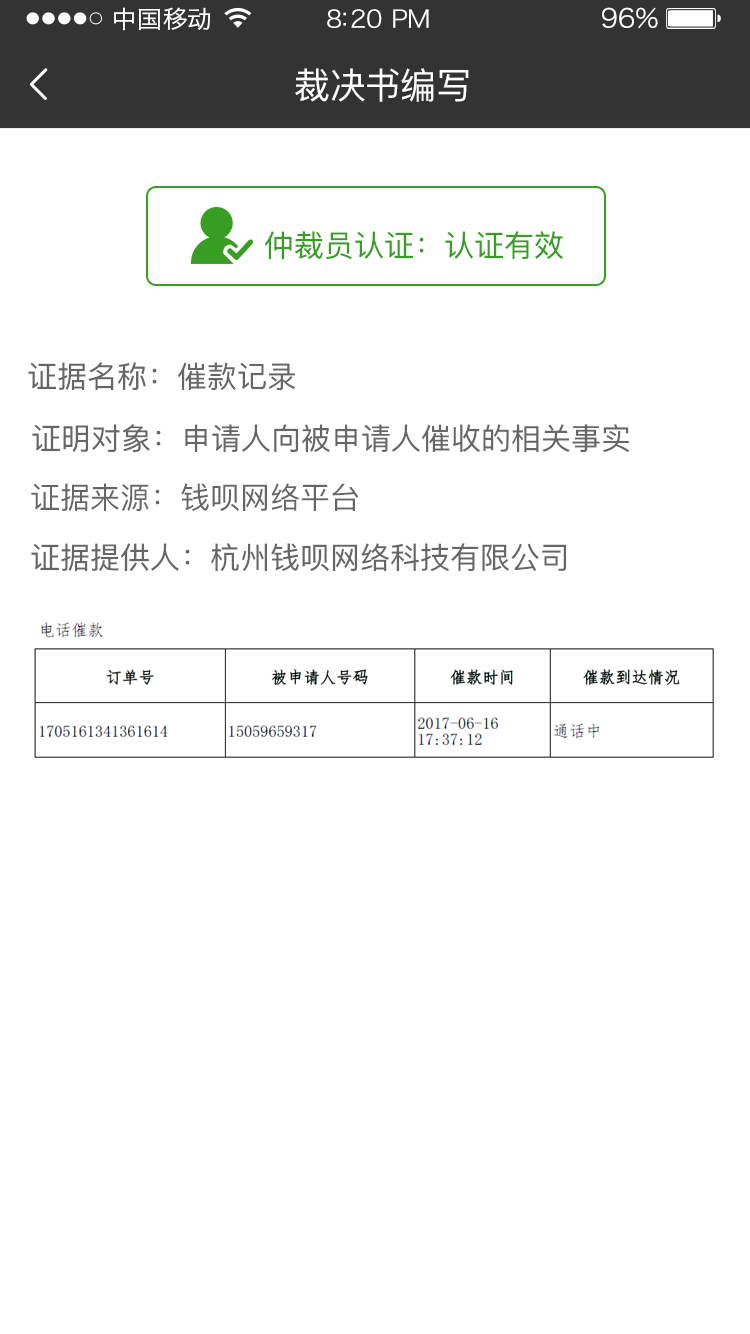
<style>
.page{position:relative;width:750px;height:1334px;background:#ffffff}
.page>*{position:absolute;margin:0}
.t1{font:24px "HiraginoSansGB-W3";letter-spacing:0.02em;color:#ffffff;scale:1.03 1}
.t2{font:24px "HiraginoSansGB-W3";letter-spacing:-0.02em;color:#ffffff;scale:1.03 1}
.t3{font:26.2px "HiraginoSansGB-W3";letter-spacing:-0.02em;color:#ffffff;scale:1.03 1}
.t4{font:36px "PingFangSC-Regular";letter-spacing:-0.02em;color:#ffffff}
.t5{font:30px "PingFangSC-Regular";color:#379e23}
.t6{font:30px "PingFangSC-Regular";color:#666666}
</style>
<div class="page">
<p class="t1" style="left:114px;top:7px;width:97px;height:24px">中国移动</p>
<p class="t2" style="left:327px;top:9px;width:102px;height:19px">8:20 PM</p>
<p class="t3" style="left:602px;top:7px;width:56px;height:22px">96%</p>
<p class="t4" style="left:295px;top:68px;width:174px;height:34px">裁决书编写</p>
<p class="t5" style="left:264px;top:231px;width:299px;height:29px">仲裁员认证：认证有效</p>
<p class="t6" style="left:28px;top:362px;width:267px;height:29px">证据名称：催款记录</p>
<p class="t6" style="left:32px;top:424px;width:597px;height:29px">证明对象：申请人向被申请人催收的相关事实</p>
<p class="t6" style="left:31px;top:483px;width:328px;height:28px">证据来源：钱呗网络平台</p>
<p class="t6" style="left:31px;top:543px;width:536px;height:29px">证据提供人：杭州钱呗网络科技有限公司</p>
</div>
